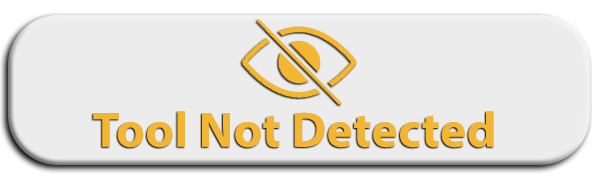
<style>
.page{position:relative;width:600px;height:180px;background:#ececec}
.page>*{position:absolute;margin:0}
.t1{font:50px "MyriadPro-Bold";letter-spacing:0.005em;color:#f3b633}
</style>
<div class="page">
<p class="t1" style="left:93px;top:111px;width:401px;height:37px">Tool Not Detected</p>
</div>
